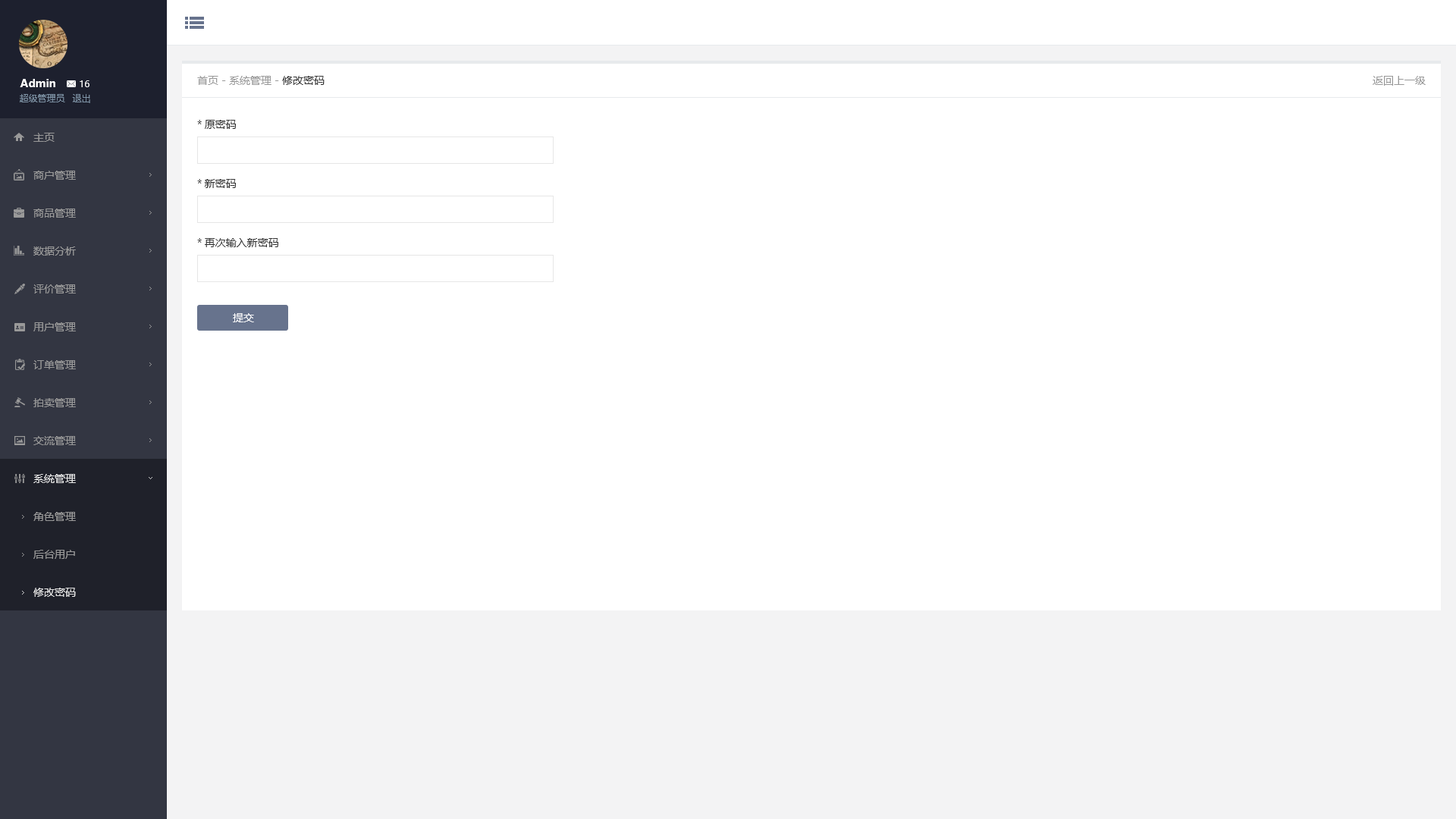
<style>
.page{position:relative;width:1456px;height:819px;background:#ffffff}
.page>*{position:absolute;margin:0}
.t1{font:10.6px "MicrosoftYaHei";color:#999999}
.t2{font:10.6px "MicrosoftYaHei";color:#333333}
.t3{font:10.6px "MicrosoftYaHei-Bold";color:#ffffff}
.t4{font:9.1px "MicrosoftYaHei";color:#ffffff}
.t5{font:9.1px "MicrosoftYaHei";color:#8095a8}
.t6{font:10.6px/59.1px "MicrosoftYaHei";color:#333333}
.t7{font:10.6px/37.9px "MicrosoftYaHei";color:#999999}
.t8{font:10.6px/37.9px "MicrosoftYaHei";color:#e5e5e5}
.t9{font:10.6px "MicrosoftYaHei";color:#ffffff}
</style>
<div class="page">
<p class="t1" style="left:197px;top:76px;width:128px;height:9px">首页 - 系统管理 - <span class="t2">修改密码</span></p>
<p class="t1" style="left:1373px;top:76px;width:53px;height:10px">返回上一级</p>
<p class="t3" style="left:20px;top:79px;width:35px;height:8px">Admin</p>
<p class="t4" style="left:80px;top:80px;width:9px;height:7px">16</p>
<p class="t5" style="left:20px;top:94px;width:45px;height:8px">超级管理员</p>
<p class="t5" style="left:72px;top:94px;width:18px;height:9px">退出</p>
<p class="t6" style="left:197px;top:120px;width:81px;height:127px">*原密码<br>*新密码<br>*再次输入新密码</p>
<p class="t7" style="left:33px;top:133px;width:43px;height:350px">主页<br>商户管理<br>商品管理<br>数据分析<br>评价管理<br>用户管理<br>订单管理<br>拍卖管理<br>交流管理<br><span class="t8">系统管理</span></p>
<p class="t9" style="left:233px;top:313px;width:21px;height:9px">提交</p>
<p class="t7" style="left:33px;top:512px;width:43px;height:85px">角色管理<br>后台用户<br><span class="t8">修改密码</span></p>
</div>
